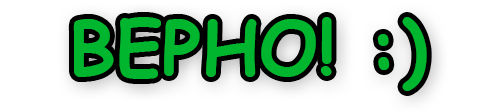
<style>
.page{position:relative;width:500px;height:112px;background:#ffffff}
.page>*{position:absolute;margin:0}
.t1{font:74.1px "ComicSansMS-Bold";color:#00b62f}
</style>
<div class="page">
<p class="t1" style="left:73px;top:17px;width:354px;height:74px">ВЕРНО! :)</p>
</div>
